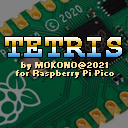
<style>
.page{position:relative;width:128px;height:128px}
.page>*{position:absolute;margin:0}
.t1{font:32px "CourierNewPS-BoldMT";font-weight:bold}
.t2{font:8px/8px "Small Fonts";color:#f4dc9a;font-weight:bold}
</style>
<div class="page">
<p class="t1" style="left:5px;top:37px;width:117px;height:20px">TETRIS</p>
<p class="t2" style="left:16px;top:62px;width:98px;height:16px;text-align:center">by MOKONO@2021<br>for Raspberry Pi Pico</p>
</div>
